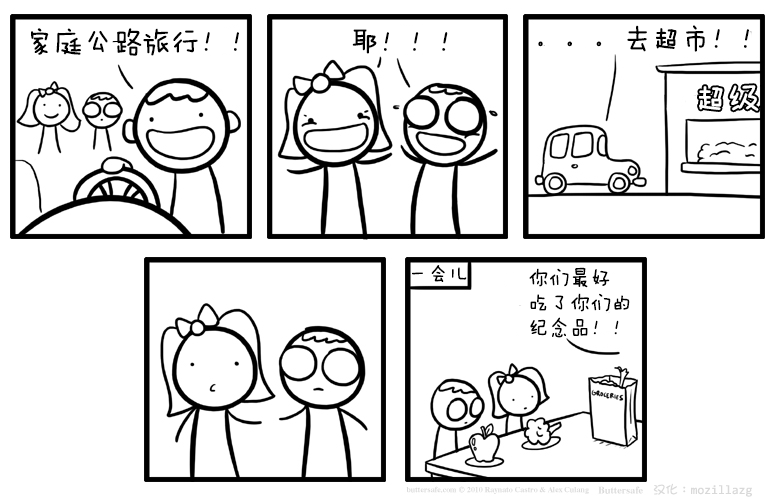
<style>
.page{position:relative;width:775px;height:499px;background:#ffffff}
.page>*{position:absolute;margin:0}
.t1{font:29.2px "FZMWJW--GB1-0";color:#000000}
.t2{font:33.3px "FZMWJW--GB1-0";color:#ffffff}
.t3{font:20.8px "FZMWJW--GB1-0";color:#000000}
.t4{font:20.8px/25px "FZMWJW--GB1-0";color:#000000}
.t5{font:12.5px "YaHei-Consolas-Hybrid";color:#d9d9d9}
.t6{font:12.5px "DFGirl";color:#d9d9d9}
</style>
<div class="page">
<p class="t1" style="left:31px;top:28px;width:208px;height:28px">家庭公路旅行！！</p>
<p class="t1" style="left:352px;top:29px;width:96px;height:25px">耶！！！</p>
<p class="t1" style="left:538px;top:25px;width:211px;height:27px">。。。去超市！！</p>
<p class="t2" style="left:699px;top:85px;width:60px;height:26px">超级</p>
<p class="t3" style="left:412px;top:265px;width:55px;height:17px">一会儿</p>
<p class="t4" style="left:529px;top:267px;width:101px;height:71px">你们最好<br>吃了你们的<br>纪念品！！</p>
<p class="t5" style="left:653px;top:483px;width:99px;height:14px"><span class="t6">汉化：</span>mozillazg</p>
</div>
